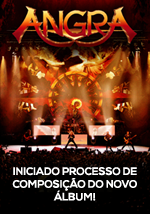
<style>
.page{position:relative;width:150px;height:214px}
.page>*{position:absolute;margin:0}
.t1{font:10.6px "NexaBold";color:#ffffff;text-transform:uppercase}
</style>
<div class="page">
<p class="t1" style="left:12px;top:167px;width:125px;height:34px;text-align:center">Iniciado processo de composição do novo álbum!</p>
</div>
